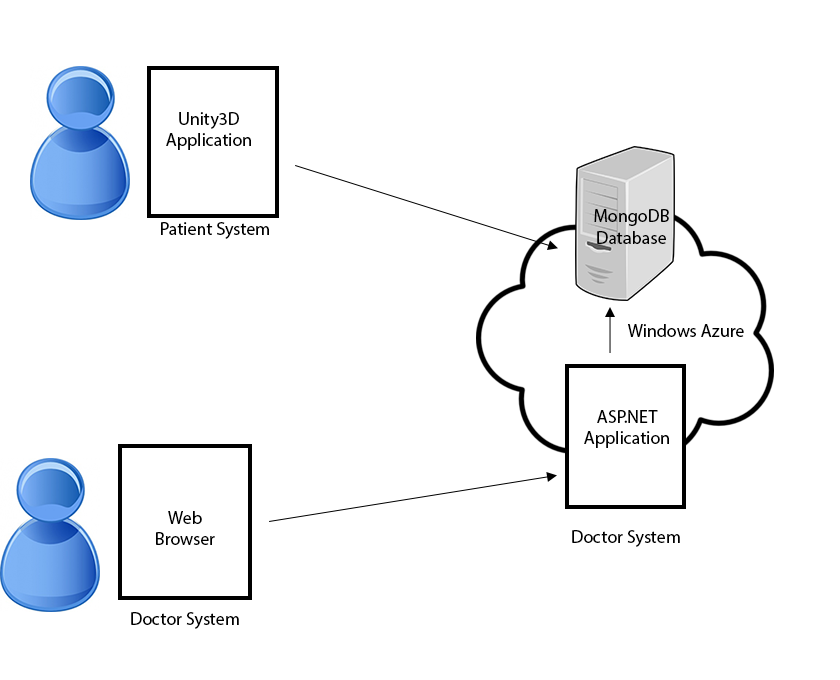
<style>
.page{position:relative;width:840px;height:680px;background:#ffffff}
.page>*{position:absolute;margin:0}
.t1{font:18px "MyriadPro-Regular";color:#010101}
.t2{font:18px "MyriadPro-Regular";color:#000000}
</style>
<div class="page">
<p class="t1" style="left:166px;top:112px;width:85px;height:38px;text-align:center">Unity3D <br>Application</p>
<p class="t2" style="left:594px;top:209px;width:75px;height:35px;text-align:center">MongoDB<br>Database</p>
<p class="t2" style="left:161px;top:222px;width:108px;height:17px">Patient System</p>
<p class="t2" style="left:628px;top:324px;width:116px;height:13px">Windows Azure</p>
<p class="t2" style="left:584px;top:410px;width:85px;height:38px;text-align:center">ASP.NET <br>Application</p>
<p class="t2" style="left:156px;top:511px;width:59px;height:34px;text-align:center">Web Browser</p>
<p class="t2" style="left:572px;top:530px;width:108px;height:17px">Doctor System</p>
<p class="t2" style="left:131px;top:612px;width:108px;height:17px">Doctor System</p>
</div>
